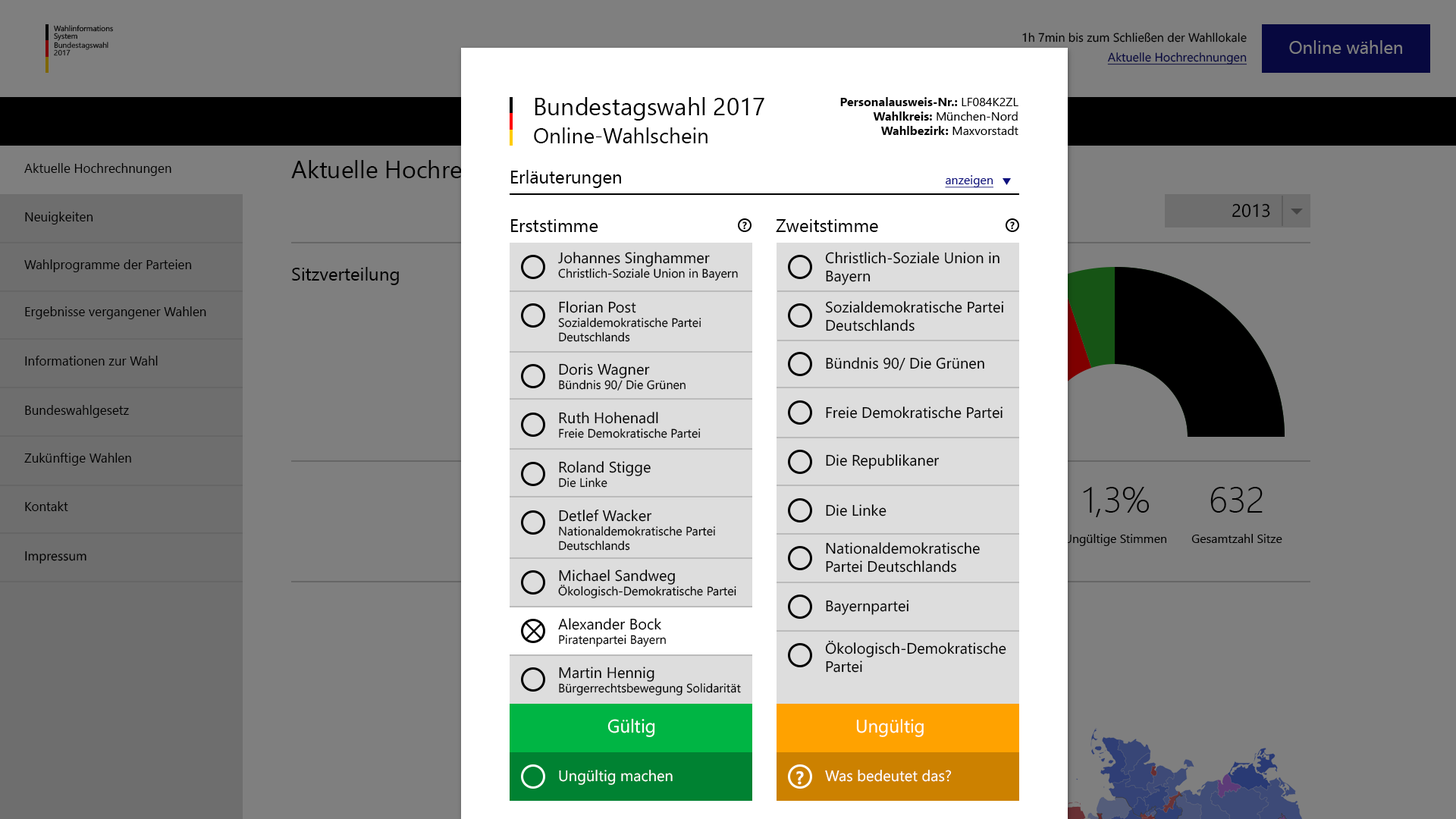
<style>
.page{position:relative;width:1456px;height:819px;background:#7f7f7f}
.page>*{position:absolute;margin:0}
.t1{font:7.6px/7.6px "SegoeUI";color:#000000}
.t2{font:12.2px/19.7px "SegoeUI";color:#000000}
.t3{font:12.2px/19.7px "SegoeUI";color:#0e117e;text-decoration:underline}
.t4{font:18.2px "SegoeUI";color:#7f7f7f}
.t5{font:24.3px "SegoeUI";color:#000000}
.t6{font:12.1px "SegoeUI-Bold";color:#000000}
.t7{font:12.1px "SegoeUI";color:#000000}
.t8{font:21.2px "SegoeUI";color:#000000}
.t9{font:12.9px "SegoeUI";color:#000000}
.t10{font:18.2px "SegoeUI";color:#000000}
.t11{font:12.1px "SegoeUI";color:#0e117e;text-decoration:underline}
.t12{font:18.3px "SegoeUI";color:#000000}
.t13{font:10.2px "SegoeUI-Bold";color:#000000}
.t14{font:15.2px "SegoeUI";color:#000000}
.t15{font:36.4px "SegoeUI-Light";color:#000000}
.t16{font:18.3px "SegoeUI";color:#ffffff}
.t17{font:18.2px "SegoeUI";color:#ffffff}
.t18{font:15.2px "SegoeUI";color:#ffffff}
.t19{font:18.2px "SegoeUI-Bold";color:#ffffff}
</style>
<div class="page">
<p class="t1" style="left:54px;top:25px;width:59px;height:16px">Wahlinformations<br>System</p>
<p class="t1" style="left:54px;top:42px;width:54px;height:14px">Bundestagswahl<br>2017</p>
<p class="t2" style="left:1022px;top:32px;width:225px;height:33px;text-align:right">1h 7min bis zum Schließen der Wahllokale<br><span class="t3">Aktuelle Hochrechnungen</span></p>
<p class="t4" style="left:1289px;top:40px;width:113px;height:14px">Online wählen</p>
<p class="t5" style="left:535px;top:97px;width:229px;height:24px">Bundestagswahl 2017</p>
<p class="t6" style="left:840px;top:97px;width:178px;height:38px;text-align:right">Personalausweis-Nr.: <span class="t7">LF084K2ZL<br></span>Wahlkreis:<span class="t7"> München-Nord<br></span>Wahlbezirk: <span class="t7">Maxvorstadt</span></p>
<p class="t8" style="left:534px;top:127px;width:174px;height:16px">Online-Wahlschein</p>
<p class="t9" style="left:24px;top:163px;width:147px;height:13px">Aktuelle Hochrechnungen</p>
<p class="t10" style="left:511px;top:170px;width:110px;height:18px">Erläuterungen</p>
<p class="t11" style="left:945px;top:175px;width:48px;height:13px">anzeigen</p>
<p class="t12" style="left:1232px;top:203px;width:38px;height:15px">2013</p>
<p class="t9" style="left:25px;top:212px;width:68px;height:12px">Neuigkeiten</p>
<p class="t10" style="left:511px;top:219px;width:87px;height:13px">Erststimme</p>
<p class="t13" style="left:742px;top:221px;width:5px;height:9px">?</p>
<p class="t10" style="left:776px;top:219px;width:102px;height:13px">Zweitstimme</p>
<p class="t13" style="left:1010px;top:221px;width:5px;height:9px">?</p>
<p class="t7" style="left:558px;top:252px;width:180px;height:29px"><span class="t14">Johannes Singhammer<br></span>Christlich-Soziale Union in Bayern</p>
<p class="t14" style="left:825px;top:252px;width:174px;height:33px">Christlich-Soziale Union in Bayern</p>
<p class="t9" style="left:24px;top:259px;width:168px;height:13px">Wahlprogramme der Parteien</p>
<p class="t10" style="left:292px;top:267px;width:107px;height:18px">Sitzverteilung</p>
<p class="t7" style="left:558px;top:301px;width:143px;height:41px"><span class="t14">Florian Post<br></span>Sozialdemokratische Partei Deutschlands</p>
<p class="t14" style="left:826px;top:301px;width:178px;height:30px">Sozialdemokratische Partei Deutschlands</p>
<p class="t9" style="left:25px;top:306px;width:181px;height:13px">Ergebnisse vergangener Wahlen</p>
<p class="t9" style="left:25px;top:356px;width:133px;height:10px">Informationen zur Wahl</p>
<p class="t7" style="left:559px;top:363px;width:127px;height:28px"><span class="t14">Doris Wagner <br></span>Bündnis 90/ Die Grünen</p>
<p class="t14" style="left:826px;top:357px;width:158px;height:14px">Bündnis 90/ Die Grünen</p>
<p class="t9" style="left:25px;top:405px;width:104px;height:13px">Bundeswahlgesetz</p>
<p class="t7" style="left:559px;top:412px;width:142px;height:26px"><span class="t14">Ruth Hohenadl<br></span>Freie Demokratische Partei</p>
<p class="t14" style="left:826px;top:406px;width:177px;height:13px">Freie Demokratische Partei</p>
<p class="t9" style="left:24px;top:453px;width:107px;height:13px">Zukünftige Wahlen</p>
<p class="t14" style="left:559px;top:461px;width:92px;height:27px">Roland Stigge<br><span class="t7">Die Linke</span></p>
<p class="t14" style="left:826px;top:454px;width:114px;height:15px">Die Republikaner</p>
<p class="t15" style="left:1083px;top:487px;width:67px;height:30px">1,3%</p>
<p class="t15" style="left:1210px;top:487px;width:53px;height:26px">632</p>
<p class="t9" style="left:25px;top:501px;width:43px;height:10px">Kontakt</p>
<p class="t7" style="left:559px;top:509px;width:156px;height:42px"><span class="t14">Detlef Wacker <br></span>Nationaldemokratische Partei Deutschlands</p>
<p class="t14" style="left:826px;top:504px;width:60px;height:12px">Die Linke</p>
<p class="t7" style="left:1065px;top:534px;width:101px;height:12px">Ungültige Stimmen</p>
<p class="t7" style="left:1191px;top:534px;width:91px;height:9px">Gesamtzahl Sitze</p>
<p class="t14" style="left:826px;top:542px;width:154px;height:31px">Nationaldemokratische Partei Deutschlands</p>
<p class="t9" style="left:25px;top:551px;width:61px;height:13px">Impressum</p>
<p class="t7" style="left:558px;top:570px;width:178px;height:28px"><span class="t14">Michael Sandweg <br></span>Ökologisch-Demokratische Partei</p>
<p class="t14" style="left:826px;top:600px;width:83px;height:15px">Bayernpartei</p>
<p class="t7" style="left:558px;top:618px;width:108px;height:29px"><span class="t14">Alexander Bock <br></span>Piratenpartei Bayern</p>
<p class="t14" style="left:825px;top:640px;width:181px;height:33px">Ökologisch-Demokratische Partei</p>
<p class="t7" style="left:559px;top:667px;width:182px;height:28px"><span class="t14">Martin Hennig <br></span>Bürgerrechtsbewegung Solidarität</p>
<p class="t16" style="left:607px;top:718px;width:48px;height:19px">Gültig</p>
<p class="t17" style="left:856px;top:719px;width:68px;height:18px">Ungültig</p>
<p class="t18" style="left:559px;top:770px;width:114px;height:15px">Ungültig machen</p>
<p class="t19" style="left:796px;top:771px;width:8px;height:14px">?</p>
<p class="t18" style="left:825px;top:770px;width:127px;height:12px">Was bedeutet das?</p>
</div>
